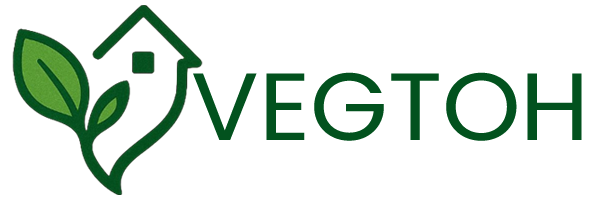
<style>
.page{position:relative;width:600px;height:200px;background:#ffffff}
.page>*{position:absolute;margin:0}
.t1{font:95.2px "Poppins-Regular";color:#02521e;text-transform:uppercase;scale:1.05 1}
</style>
<div class="page">
<p class="t1" style="left:193px;top:72px;width:389px;height:69px">vegtoh</p>
</div>
